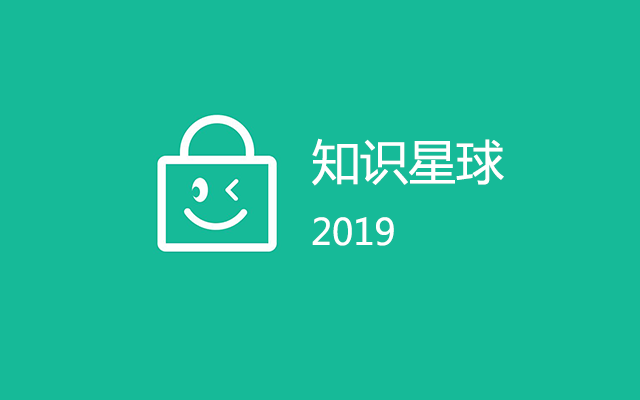
<style>
.page{position:relative;width:640px;height:400px;background:#16ba98}
.page>*{position:absolute;margin:0}
.t1{font:48px "MicrosoftYaHei";color:#ffffff}
.t2{font:36px "MicrosoftYaHei";color:#ffffff}
</style>
<div class="page">
<p class="t1" style="left:312px;top:138px;width:192px;height:48px">知识星球</p>
<p class="t2" style="left:312px;top:217px;width:82px;height:29px">2019</p>
</div>
